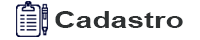
<style>
.page{position:relative;width:200px;height:40px;background:#ffffff}
.page>*{position:absolute;margin:0}
.t1{font:23.5px "Arial-BoldMT";color:#2e3132;scale:1.28 1}
</style>
<div class="page">
<p class="t1" style="left:55px;top:11px;width:128px;height:17px">Cadastro</p>
</div>
